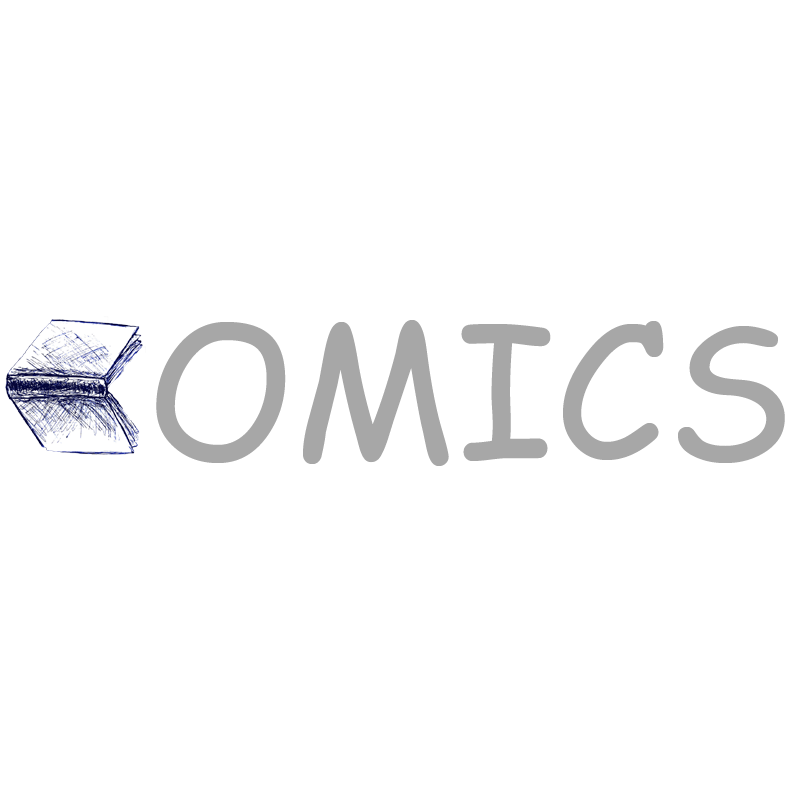
<style>
.page{position:relative;width:800px;height:799px;background:#ffffff}
.page>*{position:absolute;margin:0}
.t1{font:183.6px "ComicSansMS";color:#a7a7a7}
</style>
<div class="page">
<p class="t1" style="left:156px;top:320px;width:629px;height:146px">OMICS</p>
</div>
